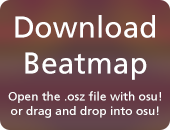
<style>
.page{position:relative;width:170px;height:130px}
.page>*{position:absolute;margin:0}
.t1{font:30px "FrutigerLinotype-Roman";color:#ffffff}
.t2{font:12px "FrutigerLinotype-Roman";color:#ffffff}
</style>
<div class="page">
<p class="t1" style="left:15px;top:15px;width:140px;height:65px;text-align:center">Download<br>Beatmap</p>
<p class="t2" style="left:8px;top:91px;width:153px;height:27px;text-align:center">Open the .osz file with osu! or drag and drop into osu!</p>
</div>
